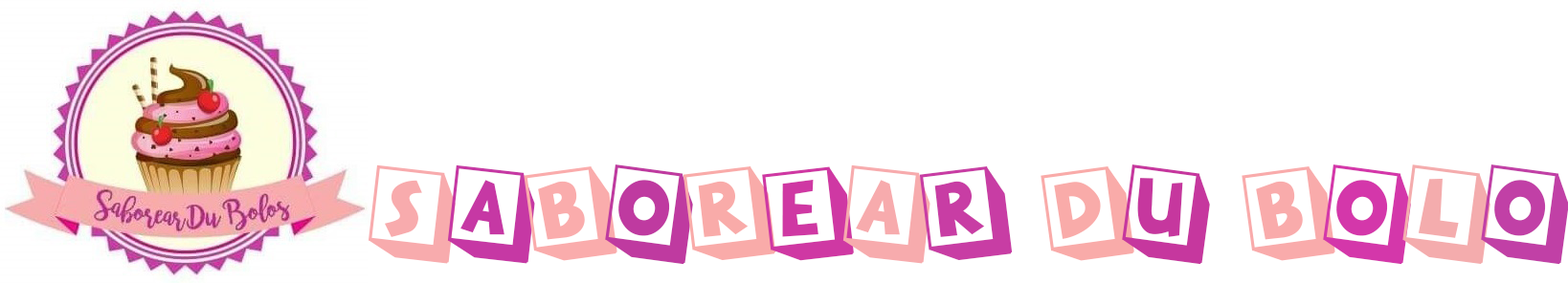
<style>
.page{position:relative;width:1568px;height:283px;background:#ffffff}
.page>*{position:absolute;margin:0}
.t1{font:134px "LOVE-YOU";color:#f8abad}
.t2{font:134px "LOVE-YOU";color:#c638a4}
.t3{font:134px "LOVE-YOU";color:#faacac}
.t4{font:134px "LOVE-YOU";color:#bf3aa0}
.t5{font:134px "LOVE-YOU";color:#f9aba9}
.t6{font:134px "LOVE-YOU";color:#cf38a3}
.t7{font:134px "LOVE-YOU";color:#f7abad}
.t8{font:134px "LOVE-YOU";color:#c83da4}
.t9{font:134px "LOVE-YOU";color:#c6379e}
.t10{font:134px "LOVE-YOU";color:#f9abab}
.t11{font:134px "LOVE-YOU";color:#d437aa}
.t12{font:134px "LOVE-YOU";color:#f4acad}
.t13{font:134px "LOVE-YOU";color:#c140a6}
</style>
<div class="page">
<p class="t1" style="left:368px;top:165px;width:1201px;height:100px">S<span class="t2">a</span><span class="t3">b</span><span class="t4">o</span><span class="t5">r</span><span class="t6">e</span><span class="t7">a</span><span class="t8">r </span><span class="t5">D</span><span class="t9">U </span><span class="t10">B</span><span class="t11">O</span><span class="t12">L</span><span class="t13">O</span></p>
</div>
